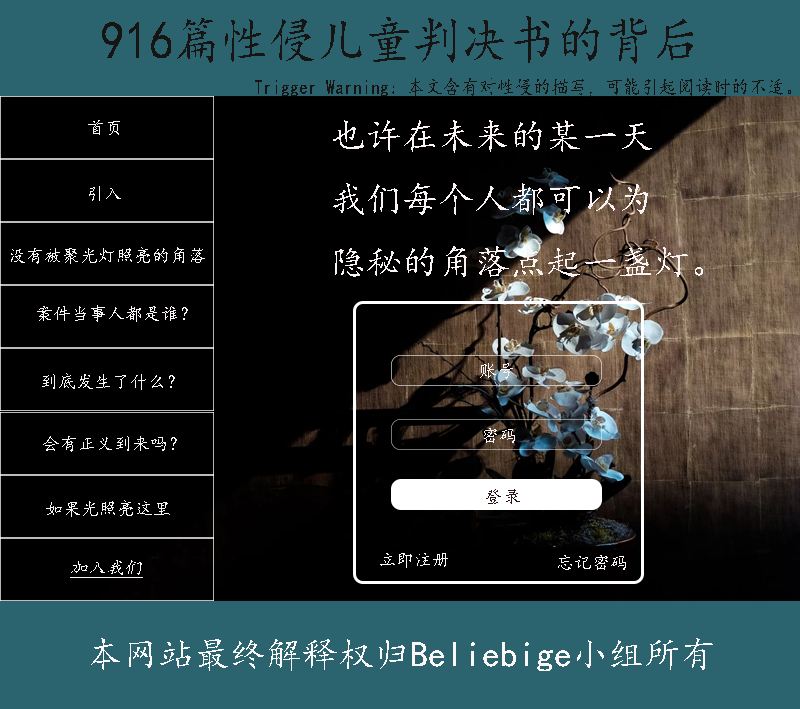
<style>
.page{position:relative;width:800px;height:709px;background:#000000}
.page>*{position:absolute;margin:0}
.t1{font:53.3px "¿¬Ìå";color:#171414;scale:0.9 1}
.t2{font:20px "¿¬Ìå";color:#171414;scale:0.9 1}
.t3{font:18px "¿¬Ìå";color:#f9f5f5}
.t4{font:36px "¿¬Ìå";color:#fbf3f3}
.t5{font:18px "¿¬Ìå";color:#fbf3f3}
.t6{font:18px "¿¬Ìå";color:#281414}
.t7{font:18px "¿¬Ìå";color:#fcf8f8}
.t8{font:18px "¿¬Ìå";color:#f9f5f5;font-style:italic;text-decoration:underline}
.t9{font:36px "¿¬Ìå";color:#fcf8f8}
</style>
<div class="page">
<p class="t1" style="left:102px;top:16px;width:591px;height:48px">916篇性侵儿童判决书的背后</p>
<p class="t2" style="left:255px;top:78px;width:536px;height:19px">Trigger Warning：本文含有对性侵的描写，可能引起阅读时的不适。</p>
<p class="t3" style="left:88px;top:120px;width:32px;height:15px">首页</p>
<p class="t4" style="left:333px;top:120px;width:370px;height:157px">也许在未来的某一天<br>我们每个人都可以为<br>隐秘的角落点起一盏灯。</p>
<p class="t3" style="left:89px;top:186px;width:32px;height:15px">引入</p>
<p class="t3" style="left:11px;top:247px;width:194px;height:17px">没有被聚光灯照亮的角落</p>
<p class="t3" style="left:37px;top:305px;width:151px;height:17px">案件当事人都是谁？</p>
<p class="t5" style="left:480px;top:363px;width:33px;height:16px">账号</p>
<p class="t3" style="left:42px;top:373px;width:133px;height:17px">到底发生了什么？</p>
<p class="t3" style="left:43px;top:436px;width:134px;height:16px">会有正义到来吗？</p>
<p class="t5" style="left:484px;top:428px;width:31px;height:15px">密码</p>
<p class="t6" style="left:486px;top:489px;width:34px;height:15px">登录</p>
<p class="t3" style="left:46px;top:500px;width:124px;height:17px">如果光照亮这里</p>
<p class="t7" style="left:380px;top:553px;width:68px;height:15px">立即注册</p>
<p class="t7" style="left:558px;top:555px;width:68px;height:15px">忘记密码</p>
<p class="t8" style="left:70px;top:560px;width:73px;height:18px">加入我们</p>
<p class="t9" style="left:91px;top:638px;width:622px;height:33px">本网站最终解释权归Beliebige小组所有</p>
</div>
